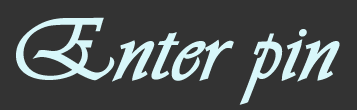
<style>
.page{position:relative;width:357px;height:110px;background:#333333}
.page>*{position:absolute;margin:0}
.t1{font:90px "Vivaldii";color:#daf9fc;font-weight:bold}
</style>
<div class="page">
<p class="t1" style="left:16px;top:17px;width:324px;height:88px">Enter pin</p>
</div>
